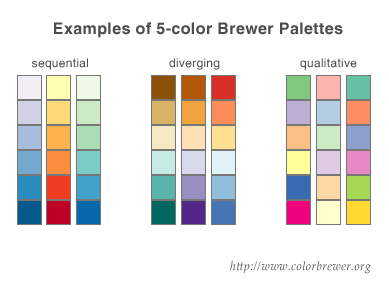
<style>
.page{position:relative;width:389px;height:287px;background:#ffffff}
.page>*{position:absolute;margin:0}
.t1{font:16px "HelveticaLT-Bold";letter-spacing:0.025em;color:#4c4c4c}
.t2{font:12px "HelveticaLT";letter-spacing:0.025em;color:#4c4c4c}
.t3{font:12px "PalatinoLinotype-Italic";letter-spacing:0.025em;color:#4c4c4c}
</style>
<div class="page">
<p class="t1" style="left:54px;top:22px;width:289px;height:16px">Examples of 5-color Brewer Palettes</p>
<p class="t2" style="left:32px;top:58px;width:56px;height:12px">sequential</p>
<p class="t2" style="left:169px;top:58px;width:51px;height:12px">diverging</p>
<p class="t2" style="left:300px;top:58px;width:57px;height:12px">qualitative</p>
<p class="t3" style="left:230px;top:261px;width:141px;height:13px">http://www.colorbrewer.org</p>
</div>
